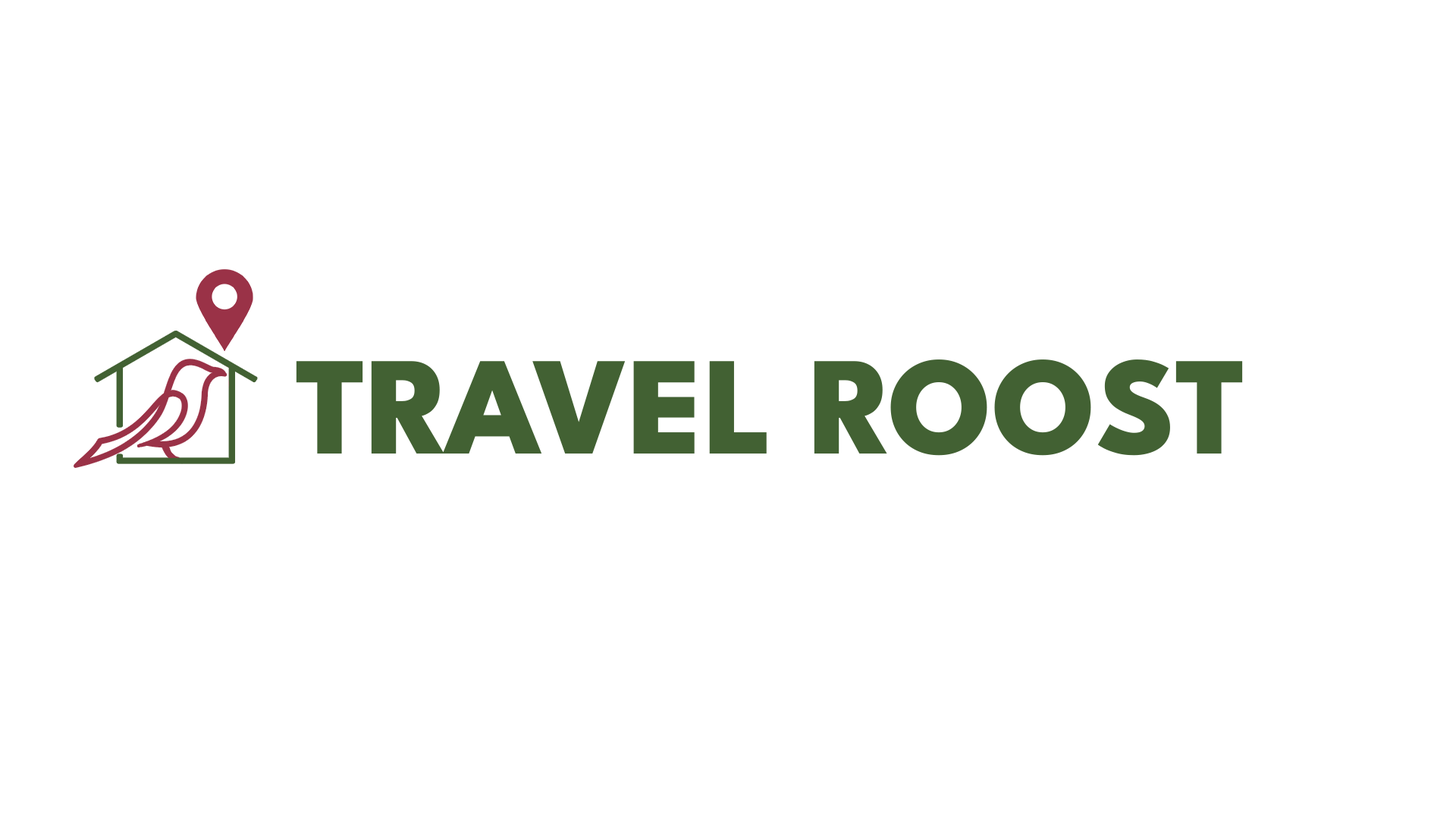
<style>
.page{position:relative;width:1456px;height:819px;background:#ffffff}
.page>*{position:absolute;margin:0}
.t1{font:139.8px "LeagueSpartan-ExtraBold";letter-spacing:-0.01em;color:#426133;text-transform:uppercase}
</style>
<div class="page">
<p class="t1" style="left:296px;top:359px;width:947px;height:97px">TRAVEL ROOST</p>
</div>
